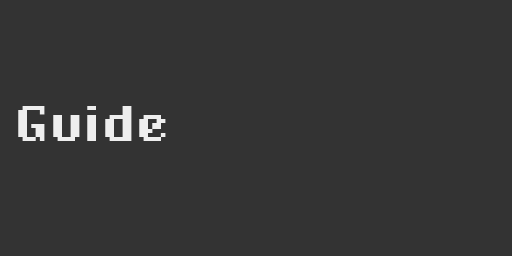
<style>
.page{position:relative;width:512px;height:256px;background:#333333}
.page>*{position:absolute;margin:0}
.t1{font:52px "LoRes12OT-Bold";color:#eeeeee}
</style>
<div class="page">
<p class="t1" style="left:18px;top:106px;width:148px;height:35px">Guide</p>
</div>
